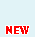
<style>
.page{position:relative;width:35px;height:37px;background:#e1f3f7}
.page>*{position:absolute;margin:0}
.t1{font:10px "ShowcardGothic-Reg";color:#ff0000}
</style>
<div class="page">
<p class="t1" style="left:6px;top:26px;width:23px;height:8px">new</p>
</div>
